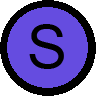
<style>
.page{position:relative;width:96px;height:96px;background:#654ce0}
.page>*{position:absolute;margin:0}
.t1{font:60px "ArialMT";color:#000000}
</style>
<div class="page">
<p class="t1" style="left:29px;top:24px;width:35px;height:45px">S</p>
</div>
